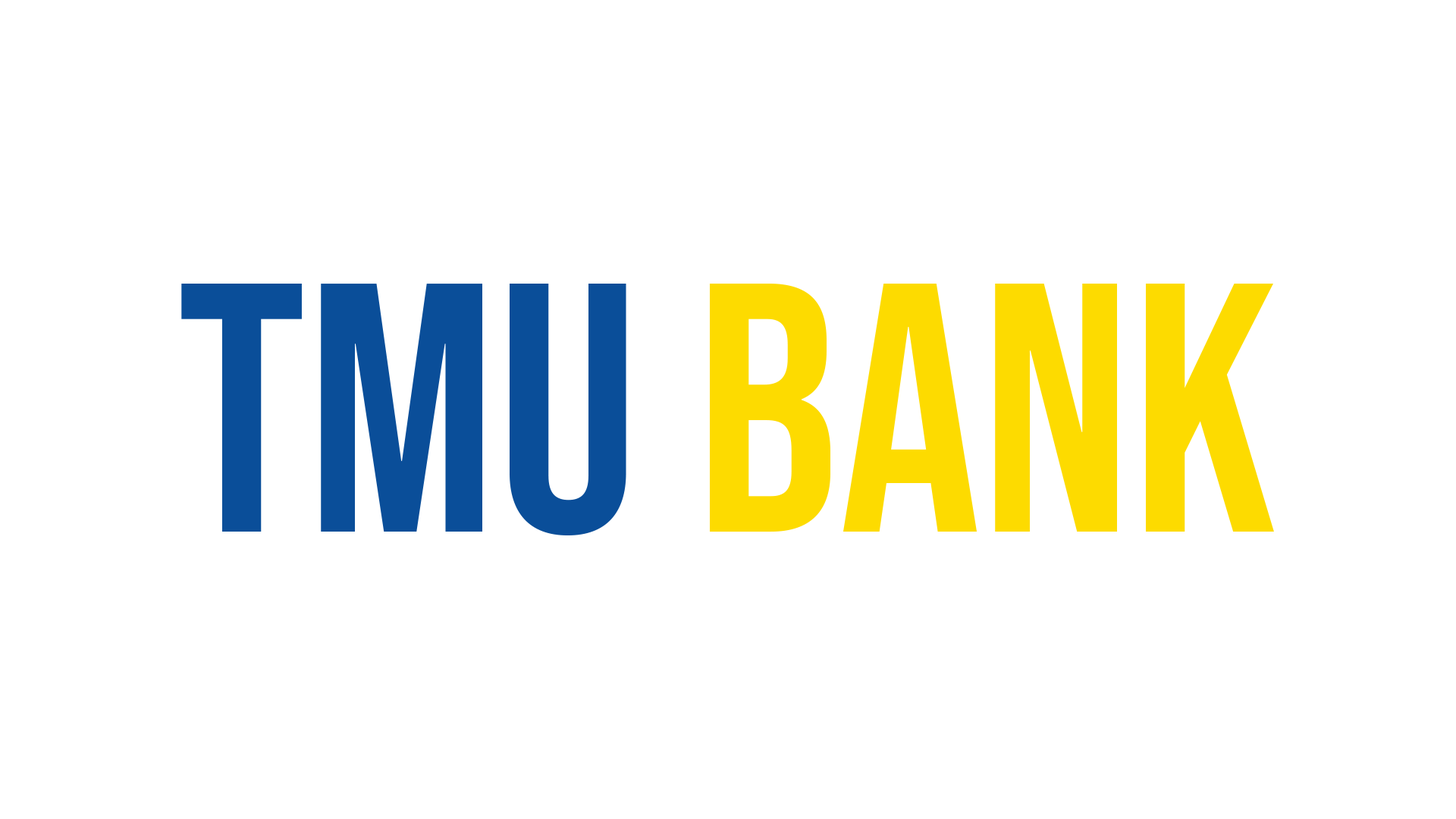
<style>
.page{position:relative;width:1456px;height:819px;background:#ffffff}
.page>*{position:absolute;margin:0}
.t1{font:354px "BebasNeue-Regular";color:#fddb00}
.t2{font:354px "BebasNeue-Regular";color:#0a4d99}
</style>
<div class="page">
<p class="t1" style="left:181px;top:284px;width:1093px;height:252px"><span class="t2">TMU</span> BANK</p>
</div>
